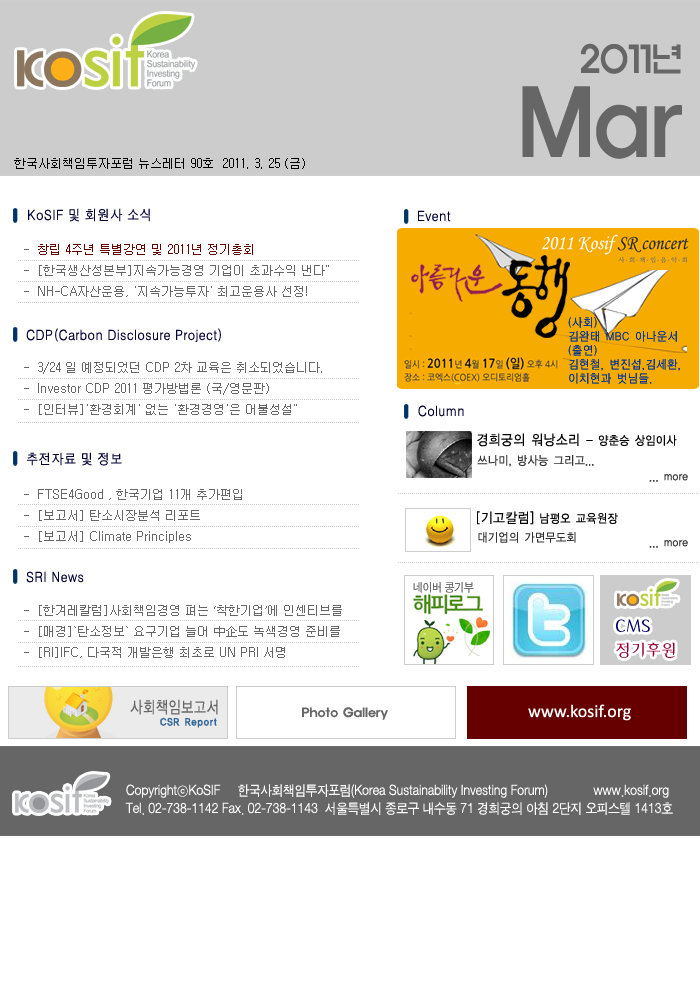
<style>
.page{position:relative;width:700px;height:1000px;background:#ffffff}
.page>*{position:absolute;margin:0}
.t1{font:36.1px/41.9px "ExpoM-HM";color:#666666;scale:0.89 1}
.t2{font:90.2px/41.9px "ExpoM-HM";color:#666666;scale:0.89 1}
.t3{font:12px "Gulim";color:#000000}
.t4{font:14px "H2gtrM";color:#000033;scale:0.9 1}
.t5{font:12px "Gulim";color:#666666}
.t6{font:12px "Gulim";color:#660000}
.t7{font:12px/14px "YDIYGO120-KSCpc-EUC-H";color:#003399;scale:0.9 1}
.t8{font:12px "YDIYGO120-KSCpc-EUC-H";letter-spacing:-0.025em;color:#000000;scale:0.9 1}
.t9{font:14px "YDIYGO120-KSCpc-EUC-H";letter-spacing:-0.025em;color:#000000;scale:0.9 1}
.t10{font:12px "YDIYGO120-KSCpc-EUC-H";letter-spacing:-0.025em;color:#333333;scale:0.9 1}
.t11{font:17.1px/24px "Gaeul";color:#990033}
.t12{font:17.1px/24px "Gaeul";color:#000066}
.t13{font:12px "ExpoM-HM";color:#666666}
.t14{font:18px "Calibri";color:#ffffff}
.t15{font:14px/18px "SandJg";color:#ffffff;scale:0.9 1}
</style>
<div class="page">
<p class="t1" style="left:522px;top:43px;width:160px;height:116px;text-align:right">2011년<br><span class="t2">Mar</span></p>
<p class="t3" style="left:14px;top:158px;width:291px;height:11px">한국사회책임투자포럼 뉴스레터 90호  2011. 3. 25 (금)</p>
<p class="t4" style="left:28px;top:208px;width:122px;height:14px">KoSIF 및 회원사 소식</p>
<p class="t4" style="left:418px;top:210px;width:33px;height:12px">Event</p>
<p class="t5" style="left:24px;top:244px;width:305px;height:53px">-  <span class="t6">창립 4주년 특별강연 및 2011년 정기총회 <br></span>-  [한국생산성본부]지속가능경영 기업이 초과수익 낸다"<br>-  NH-CA자산운용, '지속가능투자' 최고운용사 선정!</p>
<p class="t7" style="left:568px;top:317px;width:112px;height:67px">(사회) <br>김완태 MBC 아나운서<br>(출연) <br>김현철, 변진섭,김세환,<br>이치현과 벗님들.</p>
<p class="t4" style="left:26px;top:328px;width:195px;height:14px">CDP(Carbon Disclosure Project)</p>
<p class="t5" style="left:24px;top:362px;width:298px;height:53px">-  3/24 일 예정되었던 CDP 2차 교육은 취소되었습니다.<br>-  Investor CDP 2011 평가방법론 (국/영문판)  <br>-  [인터뷰]'환경회계' 없는 '환경경영'은 어불성설"</p>
<p class="t4" style="left:418px;top:405px;width:46px;height:12px">Column</p>
<p class="t8" style="left:477px;top:433px;width:200px;height:14px"><span class="t9">경희궁의 워낭소리 </span>- 양춘승 상임이사</p>
<p class="t4" style="left:27px;top:452px;width:95px;height:14px">추전자료 및 정보</p>
<p class="t10" style="left:477px;top:455px;width:117px;height:12px">쓰나미, 방사능 그리고...</p>
<p class="t10" style="left:649px;top:474px;width:39px;height:8px">... more</p>
<p class="t5" style="left:24px;top:489px;width:218px;height:54px">-  FTSE4Good , 한국기업 11개 추가편입<br>-  [보고서] 탄소시장분석 리포트   <br>-  [보고서] Climate Principles</p>
<p class="t8" style="left:477px;top:511px;width:141px;height:14px"><span class="t9">[기고칼럼]</span> 남평오 교육원장</p>
<p class="t10" style="left:478px;top:532px;width:98px;height:11px">대기업의 가면무도회</p>
<p class="t10" style="left:649px;top:540px;width:39px;height:8px">... more</p>
<p class="t4" style="left:26px;top:571px;width:58px;height:12px">SRI News</p>
<p class="t5" style="left:24px;top:605px;width:318px;height:53px">-  [한겨레칼럼]사회책임경영 펴는 ‘착한기업’에 인센티브를 <br>-  [매경]`탄소정보` 요구기업 늘어 中企도 녹색경영 준비를<br>-  [RI]IFC, 다국적 개발은행 최초로 UN PRI 서명</p>
<p class="t11" style="left:616px;top:619px;width:59px;height:39px"><span class="t12">CMS <br></span>정기후원</p>
<p class="t13" style="left:302px;top:707px;width:86px;height:13px">Photo Gallery</p>
<p class="t14" style="left:528px;top:704px;width:103px;height:17px">www.kosif.org</p>
<p class="t15" style="left:125px;top:784px;width:548px;height:31px">CopyrightⓒKoSIF     한국사회책임투자포럼(Korea Sustainability Investing Forum)             www.kosif.org <br>Tel. 02-738-1142 Fax. 02-738-1143  서울특별시 종로구 내수동 71 경희궁의 아침 2단지 오피스텔 1413호</p>
</div>
